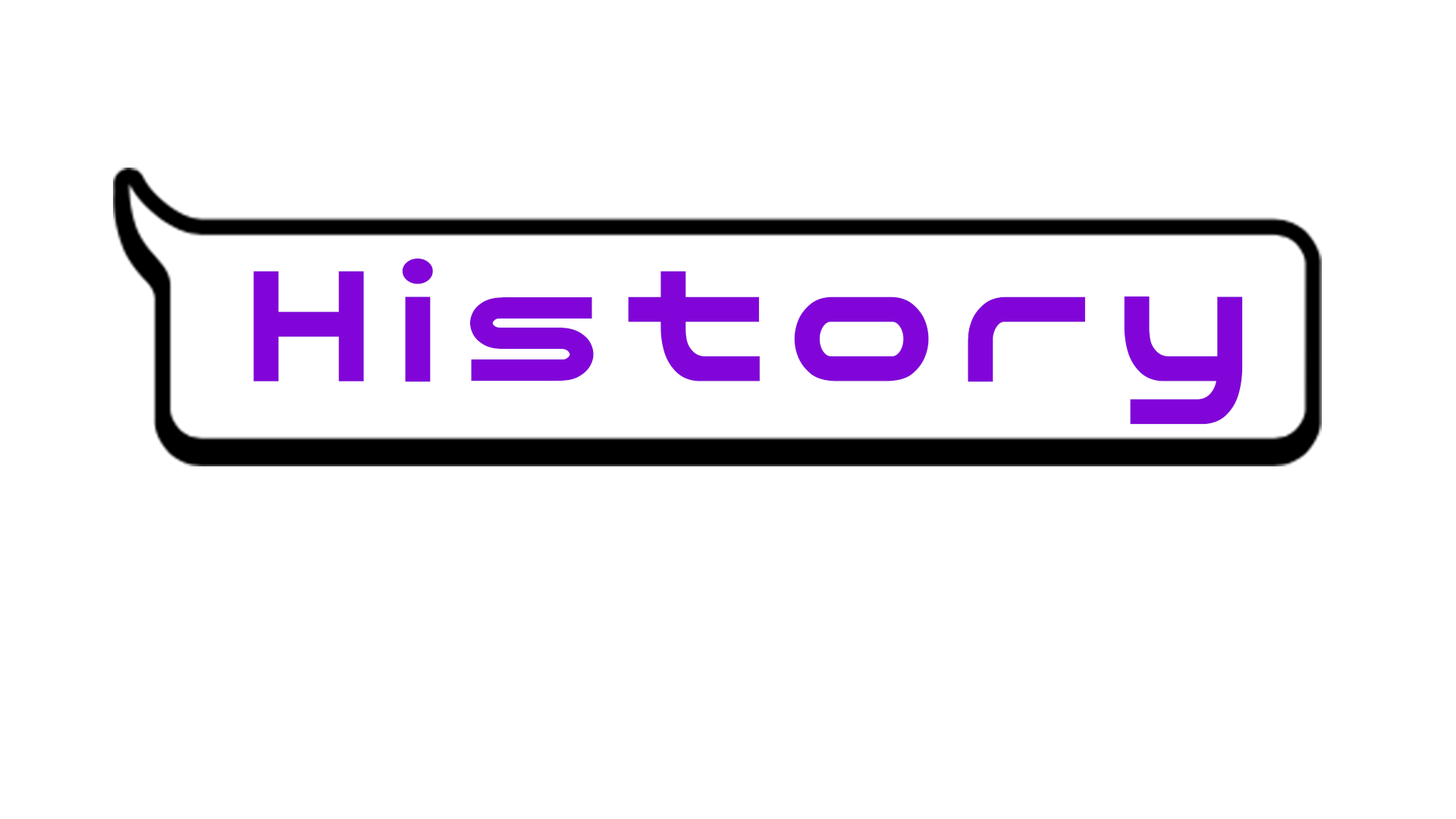
<style>
.page{position:relative;width:1456px;height:819px;background:#ffffff}
.page>*{position:absolute;margin:0}
.t1{font:189.6px "Nicoca";letter-spacing:0.1em;color:#8105d8}
</style>
<div class="page">
<p class="t1" style="left:253px;top:258px;width:990px;height:167px">History</p>
</div>
